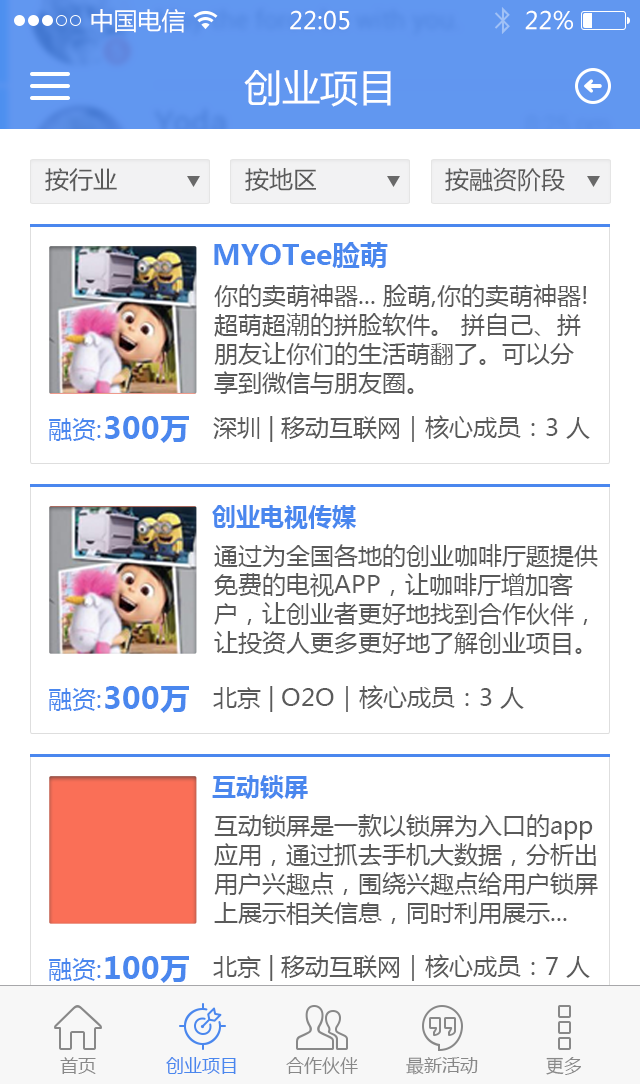
<style>
.page{position:relative;width:640px;height:1084px;background:#ffffff}
.page>*{position:absolute;margin:0}
.t1{font:24px "MicrosoftYaHei";color:#ffffff}
.t2{font:38px "MicrosoftYaHei";color:#ffffff}
.t3{font:24px "MicrosoftYaHei";color:#5a5a5a}
.t4{font:28px "MicrosoftYaHei-Bold";color:#4a87ee}
.t5{font:24px "MicrosoftYaHei";color:#4a87ee}
.t6{font:30px "MicrosoftYaHei-Bold";color:#4a87ee}
.t7{font:24px "MicrosoftYaHei-Bold";color:#4a87ee}
.t8{font:18px "MicrosoftYaHei";color:#888888}
.t9{font:18px "MicrosoftYaHei";color:#4a87ee}
</style>
<div class="page">
<p class="t1" style="left:91px;top:9px;width:94px;height:24px">中国电信</p>
<p class="t1" style="left:290px;top:10px;width:60px;height:20px">22:05</p>
<p class="t1" style="left:525px;top:10px;width:48px;height:20px">22%</p>
<p class="t2" style="left:244px;top:70px;width:147px;height:37px">创业项目</p>
<p class="t3" style="left:45px;top:168px;width:72px;height:24px">按行业</p>
<p class="t3" style="left:245px;top:168px;width:71px;height:23px">按地区</p>
<p class="t3" style="left:445px;top:167px;width:120px;height:25px">按融资阶段</p>
<p class="t4" style="left:214px;top:242px;width:174px;height:26px">MYOTee脸萌</p>
<p class="t3" style="left:214px;top:284px;width:373px;height:110px">你的卖萌神器... 脸萌,你的卖萌神器!超萌超潮的拼脸软件。 拼自己、拼朋友让你们的生活萌翻了。可以分享到微信与朋友圈。</p>
<p class="t5" style="left:49px;top:418px;width:52px;height:23px">融资:</p>
<p class="t6" style="left:105px;top:416px;width:84px;height:27px">300万</p>
<p class="t3" style="left:213px;top:415px;width:377px;height:27px">深圳 | 移动互联网｜核心成员：3 人</p>
<p class="t7" style="left:212px;top:505px;width:144px;height:24px">创业电视传媒</p>
<p class="t3" style="left:214px;top:544px;width:384px;height:111px">通过为全国各地的创业咖啡厅题提供免费的电视APP，让咖啡厅增加客户，让创业者更好地找到合作伙伴，让投资人更多更好地了解创业项目。</p>
<p class="t5" style="left:49px;top:688px;width:52px;height:23px">融资:</p>
<p class="t6" style="left:105px;top:686px;width:84px;height:27px">300万</p>
<p class="t3" style="left:213px;top:685px;width:311px;height:27px">北京 | O2O｜核心成员：3 人</p>
<p class="t7" style="left:212px;top:775px;width:96px;height:24px">互动锁屏</p>
<p class="t3" style="left:214px;top:814px;width:384px;height:111px">互动锁屏是一款以锁屏为入口的app应用，通过抓去手机大数据，分析出用户兴趣点，围绕兴趣点给用户锁屏上展示相关信息，同时利用展示...</p>
<p class="t5" style="left:49px;top:958px;width:52px;height:23px">融资:</p>
<p class="t6" style="left:105px;top:956px;width:84px;height:27px">100万</p>
<p class="t3" style="left:213px;top:954px;width:377px;height:27px">北京 | 移动互联网｜核心成员：7 人</p>
<p class="t8" style="left:60px;top:1057px;width:36px;height:17px">首页</p>
<p class="t9" style="left:166px;top:1057px;width:70px;height:17px">创业项目</p>
<p class="t8" style="left:286px;top:1057px;width:72px;height:17px">合作伙伴</p>
<p class="t8" style="left:406px;top:1057px;width:72px;height:18px">最新活动</p>
<p class="t8" style="left:546px;top:1057px;width:35px;height:18px">更多</p>
</div>
